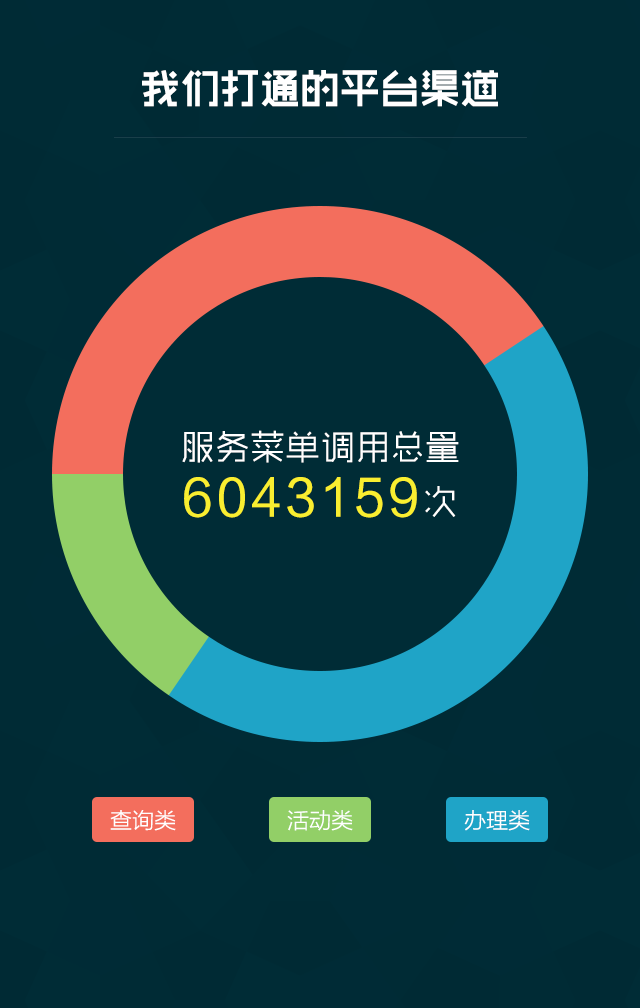
<style>
.page{position:relative;width:640px;height:1008px;background:#002c36}
.page>*{position:absolute;margin:0}
.t1{font:40px "RTWSShangGoG0v1-Bold";color:#ffffff}
.t2{font:35px/55px "RTWSShangGoG0v1-Light";color:#ffffff}
.t3{font:50px/55px "FZLTHK--GBK1-0";letter-spacing:0.08em;color:#f9ee30}
.t4{font:35px/55px "RTWSShangGoG0v1-Light";letter-spacing:0.08em;color:#ffffff}
.t5{font:22px "FZLTKHK--GBK1-0";color:#ffffff}
</style>
<div class="page">
<p class="t1" style="left:142px;top:70px;width:356px;height:37px">我们打通的平台渠道</p>
<p class="t2" style="left:182px;top:430px;width:277px;height:88px;text-align:center">服务菜单调用总量<br><span class="t3">6043159</span><span class="t4">次</span></p>
<p class="t5" style="left:110px;top:810px;width:66px;height:21px">查询类</p>
<p class="t5" style="left:287px;top:810px;width:66px;height:21px">活动类</p>
<p class="t5" style="left:464px;top:810px;width:66px;height:21px">办理类</p>
</div>
